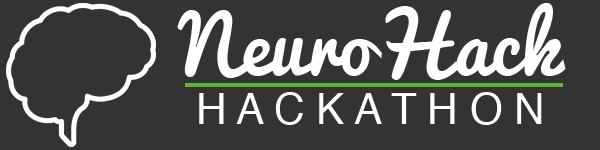
<style>
.page{position:relative;width:600px;height:150px;background:#333333}
.page>*{position:absolute;margin:0}
.t1{font:78px "Pacifico";color:#ffffff}
.t2{font:42.6px "Helvetica";color:#ffffff}
</style>
<div class="page">
<p class="t1" style="left:177px;top:3px;width:389px;height:77px">NeuroHack</p>
<p class="t2" style="left:199px;top:92px;width:343px;height:33px">H A C K A T H O N</p>
</div>
